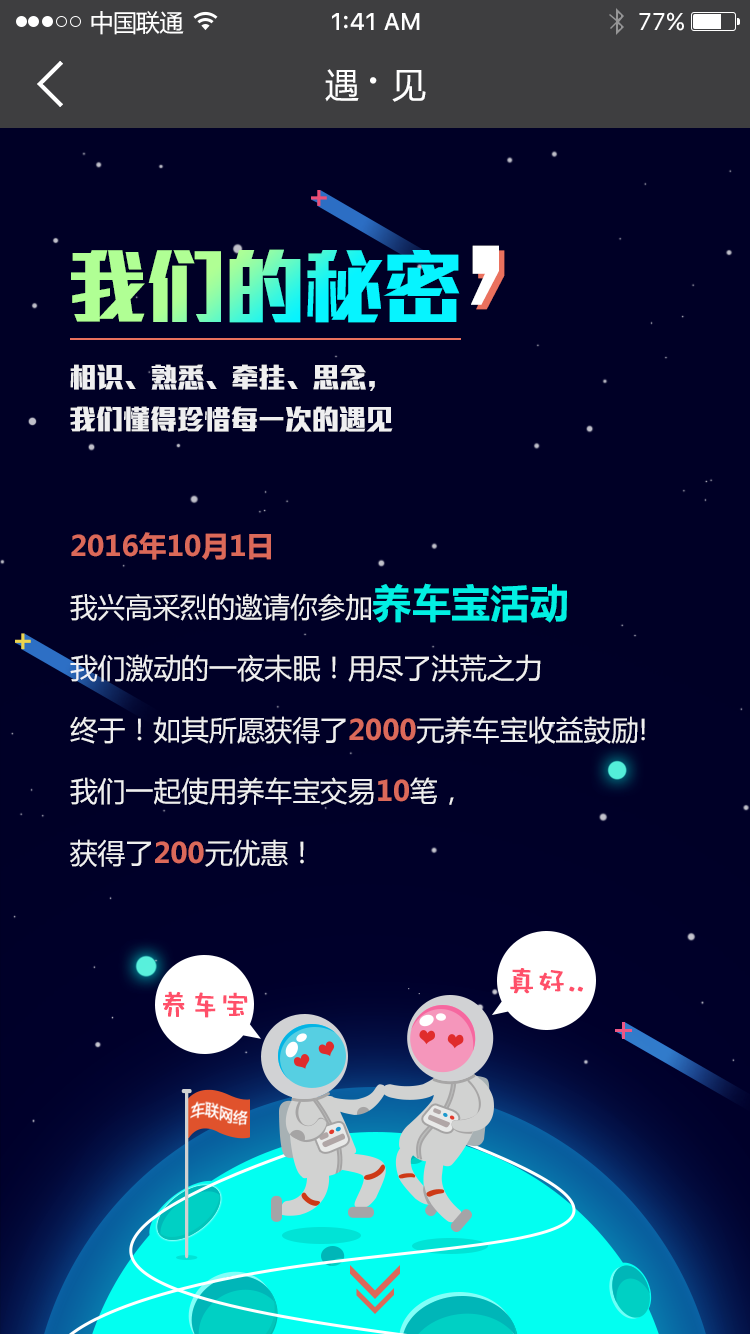
<style>
.page{position:relative;width:750px;height:1334px;background:#000026}
.page>*{position:absolute;margin:0}
.t1{font:24px "MicrosoftYaHei";letter-spacing:-0.025em;color:#ffffff}
.t2{font:24px "SFUIText-Medium";color:#ffffff}
.t3{font:24px "SFUIText-Regular";color:#ffffff}
.t4{font:34px "MicrosoftYaHei";letter-spacing:-0.025em;color:#ffffff}
.t5{font:50px "MicrosoftYaHei";letter-spacing:-0.025em;color:#ffffff}
.t6{font:239.7px "WenQuanYiZenHei";letter-spacing:-0.04em;color:#ffffff}
.t7{font:81.8px "MStiffHeiPRC-UltraBold";letter-spacing:-0.025em}
.t8{font:239.7px "WenQuanYiZenHei";letter-spacing:-0.04em}
.t9{font:28px "MStiffHeiPRC-UltraBold";letter-spacing:-0.025em;color:#ffffff}
.t10{font:28.2px "MicrosoftYaHei-Bold";color:#ea715e}
.t11{font:27.7px "MicrosoftYaHei";color:#ffffff}
.t12{font:28px "MicrosoftYaHei";color:#ffffff}
.t13{font:39.6px "MicrosoftYaHei-Bold";color:#02fff1}
.t14{font:28px "MicrosoftYaHei-Bold";color:#ea715e}
.t15{font:30px "DFPWaWaW5";color:#ff4f69;font-weight:bold}
</style>
<div class="page">
<p class="t1" style="left:91px;top:11px;width:93px;height:24px">中国联通</p>
<p class="t2" style="left:332px;top:13px;width:88px;height:17px">1:41 AM</p>
<p class="t3" style="left:639px;top:12px;width:45px;height:19px">77%</p>
<p class="t4" style="left:325px;top:69px;width:101px;height:33px">遇 <span class="t5">· </span>见</p>
<p class="t6" style="left:471px;top:245px;width:28px;height:60px">，</p>
<p class="t7" style="left:71px;top:249px;width:389px;height:74px">我们的秘密</p>
<p class="t8" style="left:476px;top:250px;width:29px;height:60px">，</p>
<p class="t9" style="left:70px;top:364px;width:305px;height:27px;opacity:0.9">相识、熟悉、牵挂、思念，</p>
<p class="t9" style="left:70px;top:406px;width:323px;height:26px;opacity:0.9">我们懂得珍惜每一次的遇见</p>
<p class="t10" style="left:71px;top:532px;width:200px;height:28px;opacity:0.9">2016年10月1日</p>
<p class="t11" style="left:70px;top:583px;width:497px;height:40px;opacity:0.9"><span class="t12">                </span>我兴高采烈的邀请你参加<span class="t13">养车宝活动</span></p>
<p class="t12" style="left:70px;top:654px;width:471px;height:28px;opacity:0.9">我们激动的一夜未眠！用尽了洪荒之力</p>
<p class="t12" style="left:70px;top:716px;width:575px;height:28px;opacity:0.9">终于！如其所愿获得了<span class="t14">2000</span>元养车宝收益鼓励!</p>
<p class="t12" style="left:70px;top:777px;width:384px;height:28px;opacity:0.9">我们一起使用养车宝交易<span class="t14">10</span>笔，</p>
<p class="t12" style="left:70px;top:839px;width:234px;height:28px;opacity:0.9">获得了<span class="t14">200</span>元优惠！</p>
<p class="t15" style="left:510px;top:968px;width:73px;height:26px">真好..</p>
<p class="t15" style="left:163px;top:991px;width:85px;height:27px">养车宝</p>
</div>
